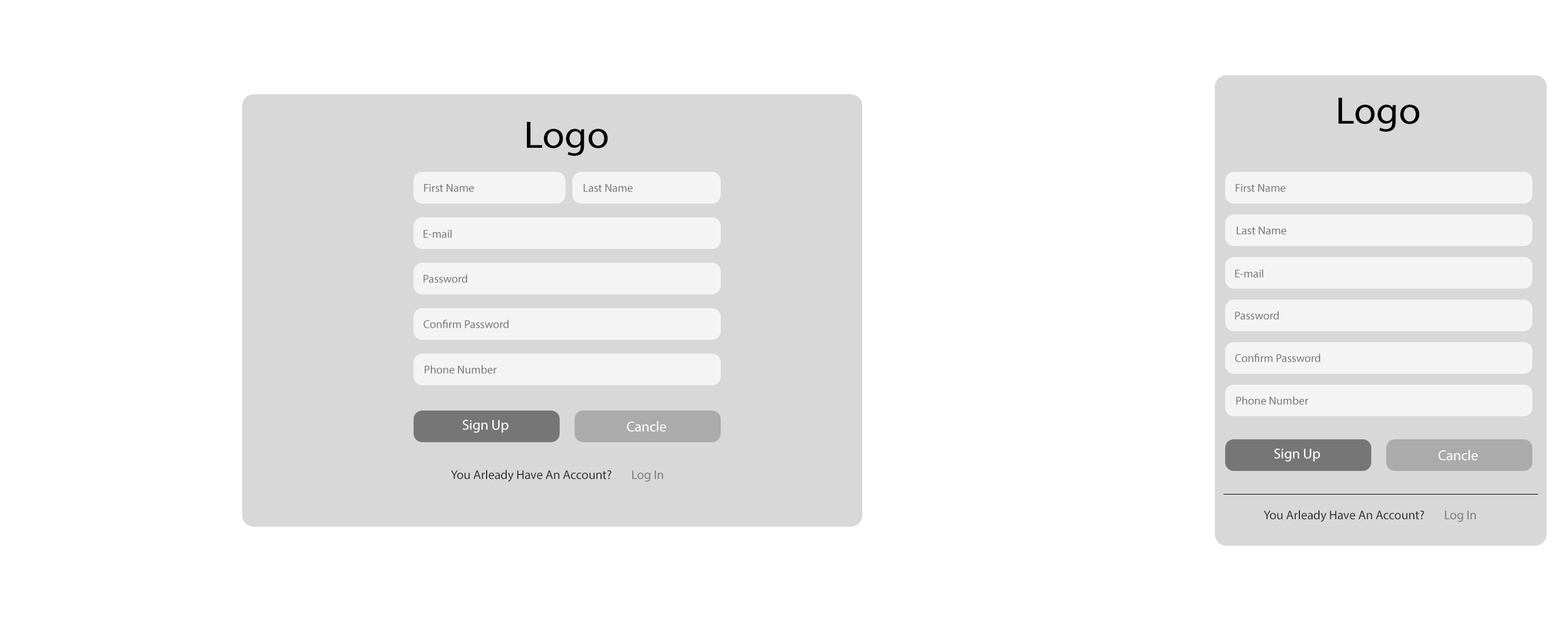
<style>
.page{position:relative;width:1568px;height:621px;background:#ffffff}
.page>*{position:absolute;margin:0}
.t1{font:38.3px "MyriadPro-Regular";color:#000000;scale:1.06 1}
.t2{font:11.5px "MyriadPro-Regular";color:#777676}
.t3{font:14.4px "MyriadPro-Regular";color:#ffffff}
.t4{font:12.7px "MyriadPro-Regular";color:#333333}
.t5{font:12.7px "MyriadPro-Regular";color:#7a7a7a}
</style>
<div class="page">
<p class="t1" style="left:1338px;top:98px;width:82px;height:34px">Logo</p>
<p class="t1" style="left:527px;top:122px;width:81px;height:34px">Logo</p>
<p class="t2" style="left:424px;top:184px;width:50px;height:8px">First Name</p>
<p class="t2" style="left:583px;top:184px;width:50px;height:8px">Last Name</p>
<p class="t2" style="left:1236px;top:184px;width:50px;height:8px">First Name</p>
<p class="t2" style="left:423px;top:230px;width:29px;height:8px">E-mail</p>
<p class="t2" style="left:1237px;top:227px;width:50px;height:8px">Last Name</p>
<p class="t2" style="left:1235px;top:269px;width:28px;height:9px">E-mail</p>
<p class="t2" style="left:423px;top:274px;width:44px;height:9px">Password</p>
<p class="t2" style="left:1235px;top:311px;width:44px;height:9px">Password</p>
<p class="t2" style="left:423px;top:320px;width:85px;height:8px">Confirm Password</p>
<p class="t2" style="left:1235px;top:354px;width:85px;height:8px">Confirm Password</p>
<p class="t2" style="left:424px;top:365px;width:73px;height:9px">Phone Number</p>
<p class="t2" style="left:1236px;top:396px;width:73px;height:9px">Phone Number</p>
<p class="t3" style="left:462px;top:420px;width:46px;height:13px">Sign Up</p>
<p class="t3" style="left:627px;top:421px;width:39px;height:11px">Cancle</p>
<p class="t3" style="left:1274px;top:449px;width:46px;height:13px">Sign Up</p>
<p class="t3" style="left:1439px;top:450px;width:39px;height:11px">Cancle</p>
<p class="t4" style="left:451px;top:470px;width:160px;height:12px">You Arleady Have An Account?</p>
<p class="t5" style="left:632px;top:471px;width:31px;height:11px">Log In</p>
<p class="t4" style="left:1264px;top:510px;width:160px;height:12px">You Arleady Have An Account?</p>
<p class="t5" style="left:1445px;top:511px;width:31px;height:11px">Log In</p>
</div>
